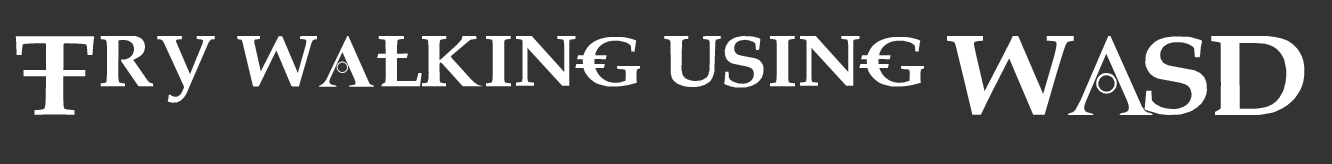
<style>
.page{position:relative;width:1332px;height:164px;background:#333333}
.page>*{position:absolute;margin:0}
.t1{font:75px "Dreaming-of-Lilian";color:#ffffff}
</style>
<div class="page">
<p class="t1" style="left:15px;top:36px;width:1290px;height:79px">Try walking using WASD</p>
</div>
